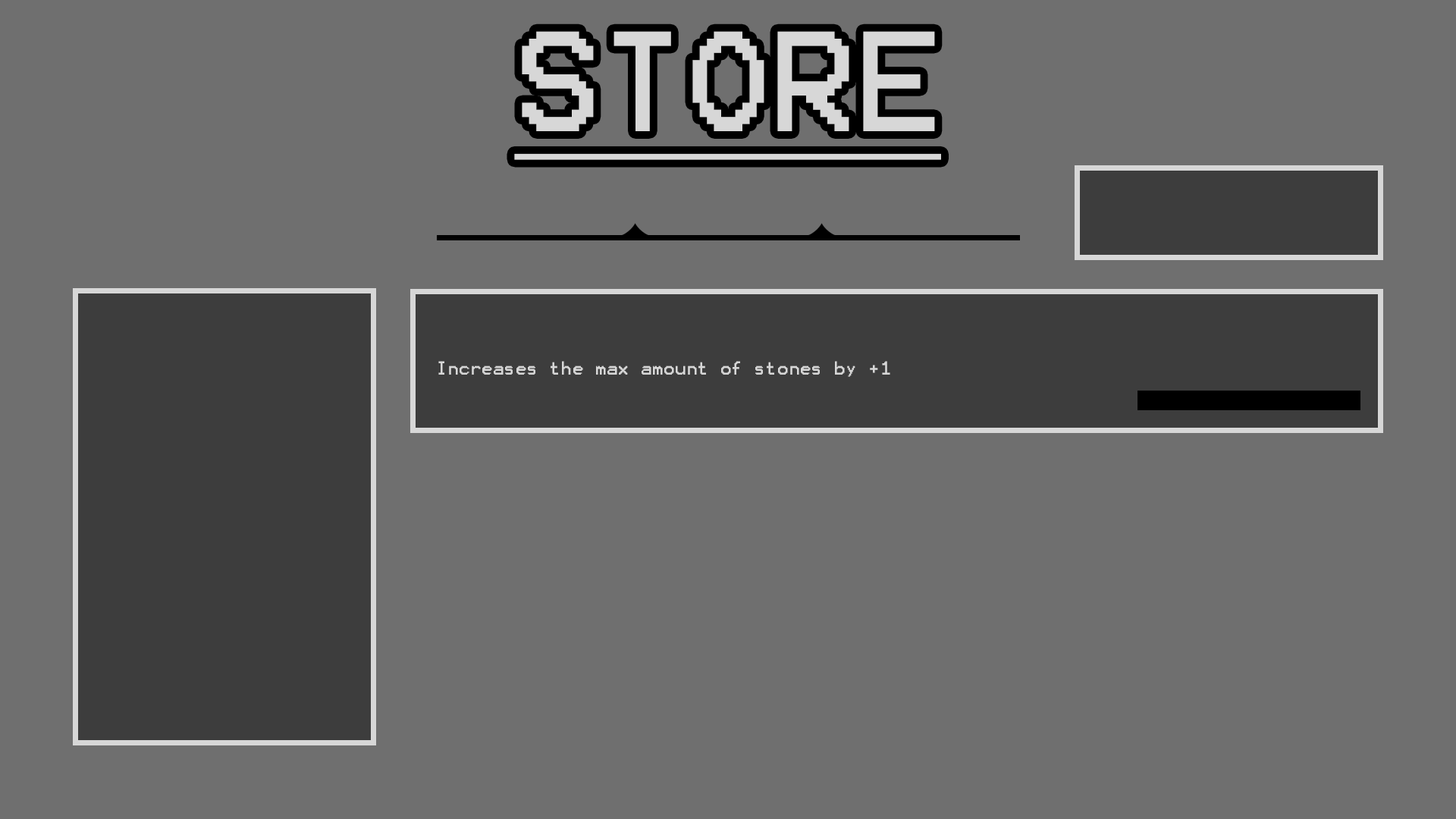
<style>
.page{position:relative;width:1456px;height:819px;background:#6f6f6f}
.page>*{position:absolute;margin:0}
.t1{font:113.7px "Terminal";color:#d7d7d7;text-decoration:underline}
.t2{font:15.2px "Terminal";color:#d7d7d7}
</style>
<div class="page">
<p class="t1" style="left:514px;top:31px;width:427px;height:129px">STORE</p>
<p class="t2" style="left:438px;top:361px;width:452px;height:16px">Increases the max amount of stones by +1</p>
</div>
